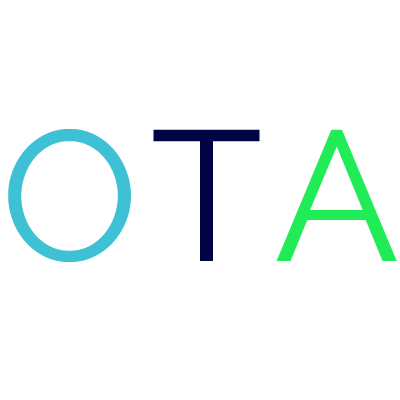
<style>
.page{position:relative;width:400px;height:400px;background:#ffffff}
.page>*{position:absolute;margin:0}
.t1{font:183.7px "Raleway";letter-spacing:0.06em;color:#3ec1d5}
.t2{font:183.7px "Raleway";letter-spacing:0.06em;color:#000444}
.t3{font:183.7px "Raleway";letter-spacing:0.06em;color:#21eb57}
</style>
<div class="page">
<p class="t1" style="left:8px;top:128px;width:389px;height:134px">O<span class="t2">T</span><span class="t3">A</span></p>
</div>
